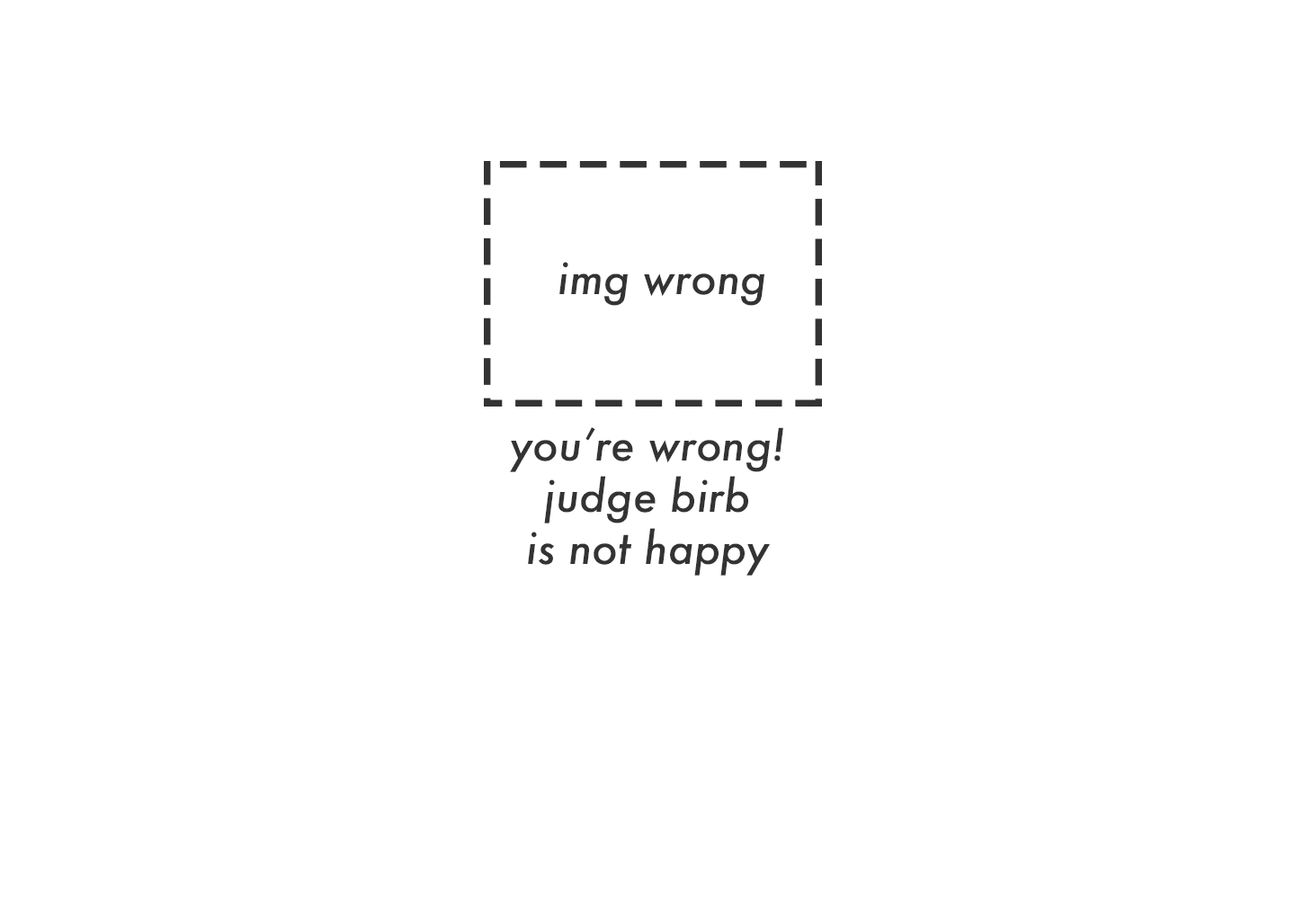
<style>
.page{position:relative;width:1295px;height:921px;background:#ffffff}
.page>*{position:absolute;margin:0}
.t1{font:43.2px "Futura-MediumItalic";color:#333333}
</style>
<div class="page">
<p class="t1" style="left:559px;top:262px;width:205px;height:44px">img wrong</p>
<p class="t1" style="left:510px;top:427px;width:273px;height:149px;text-align:center">you’re wrong!<br>judge birb<br>is not happy</p>
</div>
